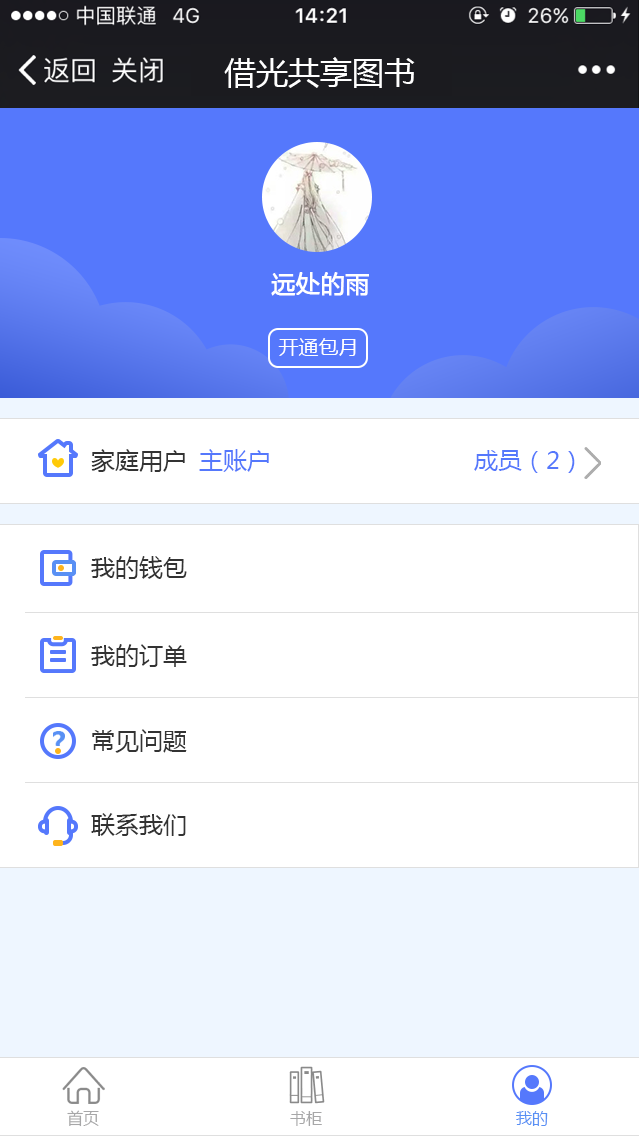
<style>
.page{position:relative;width:639px;height:1136px;background:#ffffff}
.page>*{position:absolute;margin:0}
.t1{font:32px "MicrosoftYaHei";color:#ffffff}
.t2{font:24px "MicrosoftYaHei";color:#ffffff;font-weight:bold}
.t3{font:20px "MicrosoftYaHei";color:#ffffff}
.t4{font:24px "MicrosoftYaHei";color:#333333}
.t5{font:24px "MicrosoftYaHei";color:#5578fc}
.t6{font:16px "MicrosoftYaHei";color:#a7a7a8}
.t7{font:16px "MicrosoftYaHei";color:#5990f4}
</style>
<div class="page">
<p class="t1" style="left:224px;top:57px;width:191px;height:31px">借光共享图书</p>
<p class="t2" style="left:271px;top:272px;width:98px;height:24px">远处的雨</p>
<p class="t3" style="left:278px;top:338px;width:78px;height:18px">开通包月</p>
<p class="t4" style="left:91px;top:449px;width:94px;height:23px">家庭用户</p>
<p class="t5" style="left:199px;top:449px;width:70px;height:23px">主账户</p>
<p class="t5" style="left:474px;top:450px;width:101px;height:23px">成员（2）</p>
<p class="t4" style="left:91px;top:556px;width:96px;height:23px">我的钱包</p>
<p class="t4" style="left:91px;top:644px;width:96px;height:23px">我的订单</p>
<p class="t4" style="left:92px;top:729px;width:95px;height:24px">常见问题</p>
<p class="t4" style="left:91px;top:813px;width:95px;height:23px">联系我们</p>
<p class="t6" style="left:67px;top:1110px;width:32px;height:17px">首页</p>
<p class="t6" style="left:290px;top:1111px;width:32px;height:15px">书柜</p>
<p class="t7" style="left:516px;top:1111px;width:32px;height:15px">我的</p>
</div>
